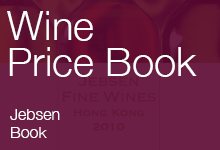
<style>
.page{position:relative;width:220px;height:150px;background:#6c1f45}
.page>*{position:absolute;margin:0}
.t1{font:40px/36px "HelveticaNeue-Light";color:#ffffff}
.t2{font:16px/18px "HelveticaNeue-Light";color:#ffffff}
</style>
<div class="page">
<p class="t1" style="left:7px;top:11px;width:190px;height:66px">Wine<br>Price Book</p>
<p class="t2" style="left:10px;top:109px;width:50px;height:29px">Jebsen<br>Book</p>
</div>
